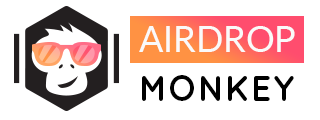
<style>
.page{position:relative;width:320px;height:120px;background:#ffffff}
.page>*{position:absolute;margin:0}
.t1{font:36.1px "Lato-Regular";color:#fafafa}
.t2{font:36.1px "Quicksand-Bold";color:#000000}
</style>
<div class="page">
<p class="t1" style="left:139px;top:26px;width:156px;height:26px">AIRDROP</p>
<p class="t2" style="left:142px;top:75px;width:152px;height:26px">MONKEY</p>
</div>
